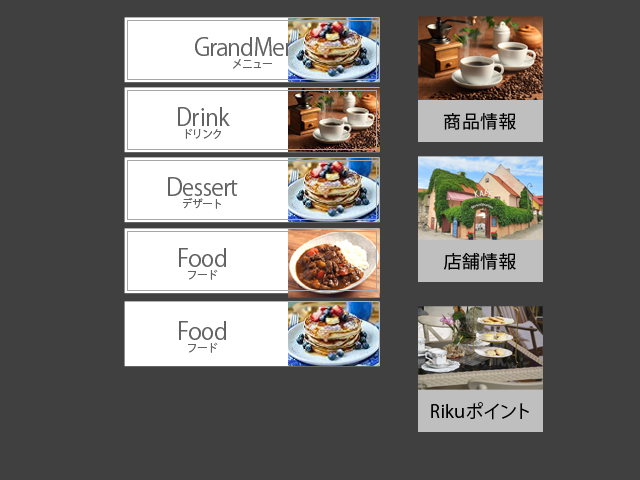
<style>
.page{position:relative;width:640px;height:480px;background:#404040}
.page>*{position:absolute;margin:0}
.t1{font:24px/35.4px "KozGoPro-Regular";letter-spacing:-0.03em;color:#626262;scale:0.95 1}
.t2{font:11px/35.4px "KozGoPro-Regular";letter-spacing:-0.03em;color:#626262;scale:0.95 1}
.t3{font:17.8px "KozGoPro-Regular";letter-spacing:0.03em;color:#010101}
</style>
<div class="page">
<p class="t1" style="left:195px;top:37px;width:113px;height:32px;text-align:center">GrandMenu<br><span class="t2">メニュー</span></p>
<p class="t1" style="left:178px;top:107px;width:52px;height:32px;text-align:center">Drink<br><span class="t2">ドリンク</span></p>
<p class="t3" style="left:443px;top:113px;width:73px;height:17px">商品情報</p>
<p class="t1" style="left:168px;top:177px;width:70px;height:32px;text-align:center">Dessert<br><span class="t2">デザート</span></p>
<p class="t1" style="left:179px;top:248px;width:47px;height:32px;text-align:center">Food<br><span class="t2">フード</span></p>
<p class="t3" style="left:444px;top:253px;width:72px;height:17px">店舗情報</p>
<p class="t1" style="left:179px;top:321px;width:47px;height:32px;text-align:center">Food<br><span class="t2">フード</span></p>
<p class="t3" style="left:431px;top:402px;width:98px;height:18px">Rikuポイント</p>
</div>
